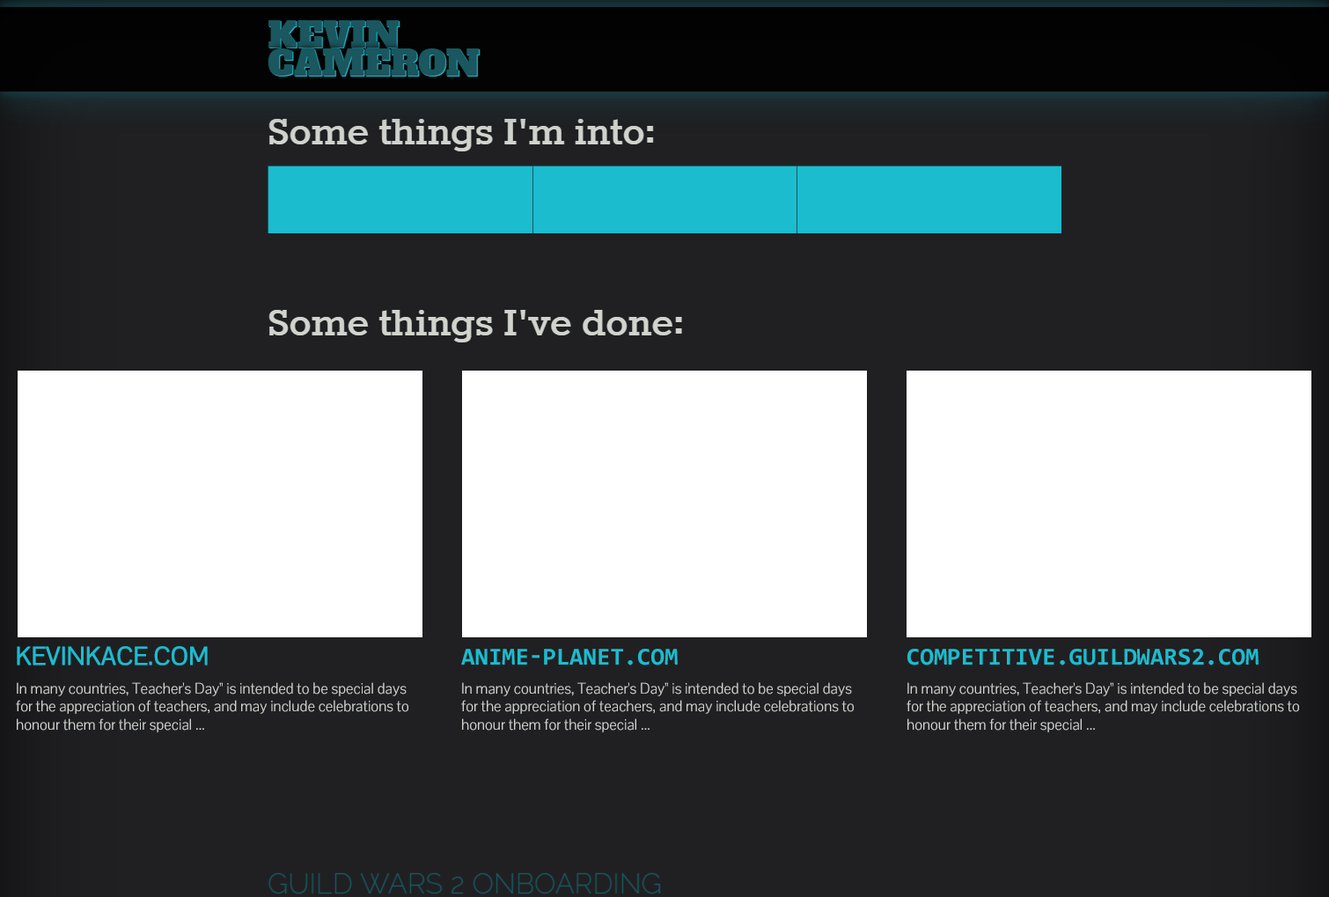
<style>
.page{position:relative;width:1329px;height:897px;background:#202023}
.page>*{position:absolute;margin:0}
.t1{font:24.6px "PontanoSans-Regular";color:#1bbcce;text-transform:uppercase;font-weight:bold}
.t2{font:24.6px "Consolas-Bold";color:#1bbcce;text-transform:uppercase}
.t3{font:15px "PontanoSans-Regular";color:#d1d4ce}
</style>
<div class="page">
<p class="t1" style="left:17px;top:646px;width:191px;height:20px">kevinkace.com</p>
<p class="t2" style="left:461px;top:649px;width:217px;height:17px">anime-planet.com</p>
<p class="t2" style="left:908px;top:649px;width:351px;height:17px">competitive.guildwars2.com</p>
<p class="t3" style="left:16px;top:682px;width:392px;height:50px">In many countries, Teacher's Day" is intended to be special days for the appreciation of teachers, and may include celebrations to honour them for their special ...</p>
<p class="t3" style="left:461px;top:682px;width:393px;height:50px">In many countries, Teacher's Day" is intended to be special days for the appreciation of teachers, and may include celebrations to honour them for their special ...</p>
<p class="t3" style="left:907px;top:682px;width:392px;height:50px">In many countries, Teacher's Day" is intended to be special days for the appreciation of teachers, and may include celebrations to honour them for their special ...</p>
</div>
